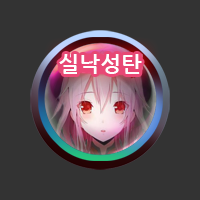
<style>
.page{position:relative;width:200px;height:200px;background:#333333}
.page>*{position:absolute;margin:0}
.t1{font:22.1px "NanumGothicBold";color:#ffffff}
</style>
<div class="page">
<p class="t1" style="left:59px;top:54px;width:83px;height:20px">실낙성탄</p>
</div>
